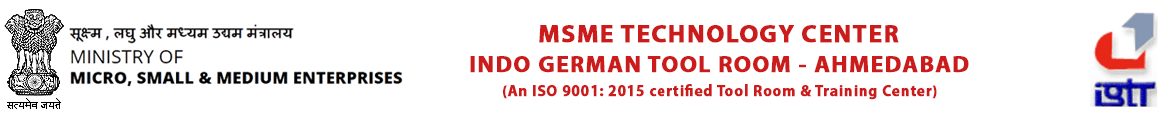
<style>
.page{position:relative;width:1170px;height:117px;background:#ffffff}
.page>*{position:absolute;margin:0}
.t1{font:42.6px "MyriadPro-Bold";letter-spacing:0.039em;color:#cc1b1b;font-weight:bold}
.t2{font:39.4px "MyriadPro-Bold";letter-spacing:0.039em;color:#cc1b1b;font-weight:bold}
.t3{font:26.8px "MyriadPro-Bold";letter-spacing:0.039em;color:#cc1b1b;font-weight:bold;scale:0.96 1}
</style>
<div class="page">
<p class="t1" style="left:539px;top:25px;width:360px;height:18px">MSME TECHNOLOGY CENTER</p>
<p class="t2" style="left:470px;top:56px;width:499px;height:17px">INDO GERMAN TOOL ROOM - AHMEDABAD</p>
<p class="t3" style="left:503px;top:84px;width:434px;height:16px">(An ISO 9001: 2015 certified Tool Room &amp; Training Center)</p>
</div>
